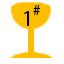
<style>
.page{position:relative;width:64px;height:64px;background:#ffffff}
.page>*{position:absolute;margin:0}
.t1{font:15.3px "MyriadPro-Regular";color:#000000}
.t2{font:22.2px "MyriadPro-Regular";color:#000000}
</style>
<div class="page">
<p class="t1" style="left:33px;top:5px;width:7px;height:10px">#</p>
<p class="t2" style="left:24px;top:11px;width:6px;height:15px">1</p>
</div>
